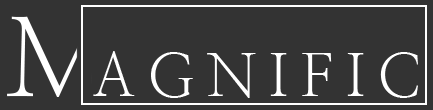
<style>
.page{position:relative;width:433px;height:110px;background:#333333}
.page>*{position:absolute;margin:0}
.t1{font:60px "NanumMyeongjo";letter-spacing:0.2em;color:#ffffff;text-transform:uppercase}
</style>
<div class="page">
<p class="t1" style="left:93px;top:51px;width:325px;height:47px">AGNIFIC</p>
</div>
